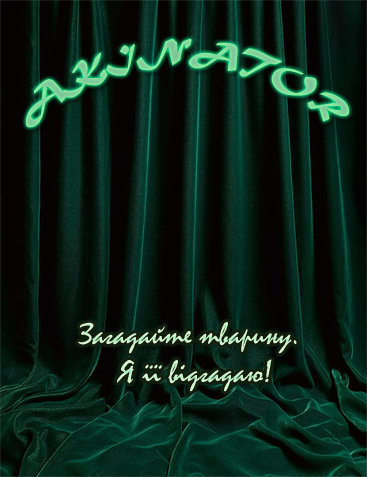
<style>
.page{position:relative;width:367px;height:477px}
.page>*{position:absolute;margin:0}
.t1{font:32px "MaturaMTScriptCapitals";color:#86da9d}
.t2{font:32px "Mistral";color:#d1f4ce}
</style>
<div class="page">
<p class="t1" style="left:26px;top:38px;width:323px;height:90px">AKINATOR</p>
<p class="t2" style="left:78px;top:322px;width:219px;height:70px">Загадайте тварину. <br>     Я її відгадаю!</p>
</div>
